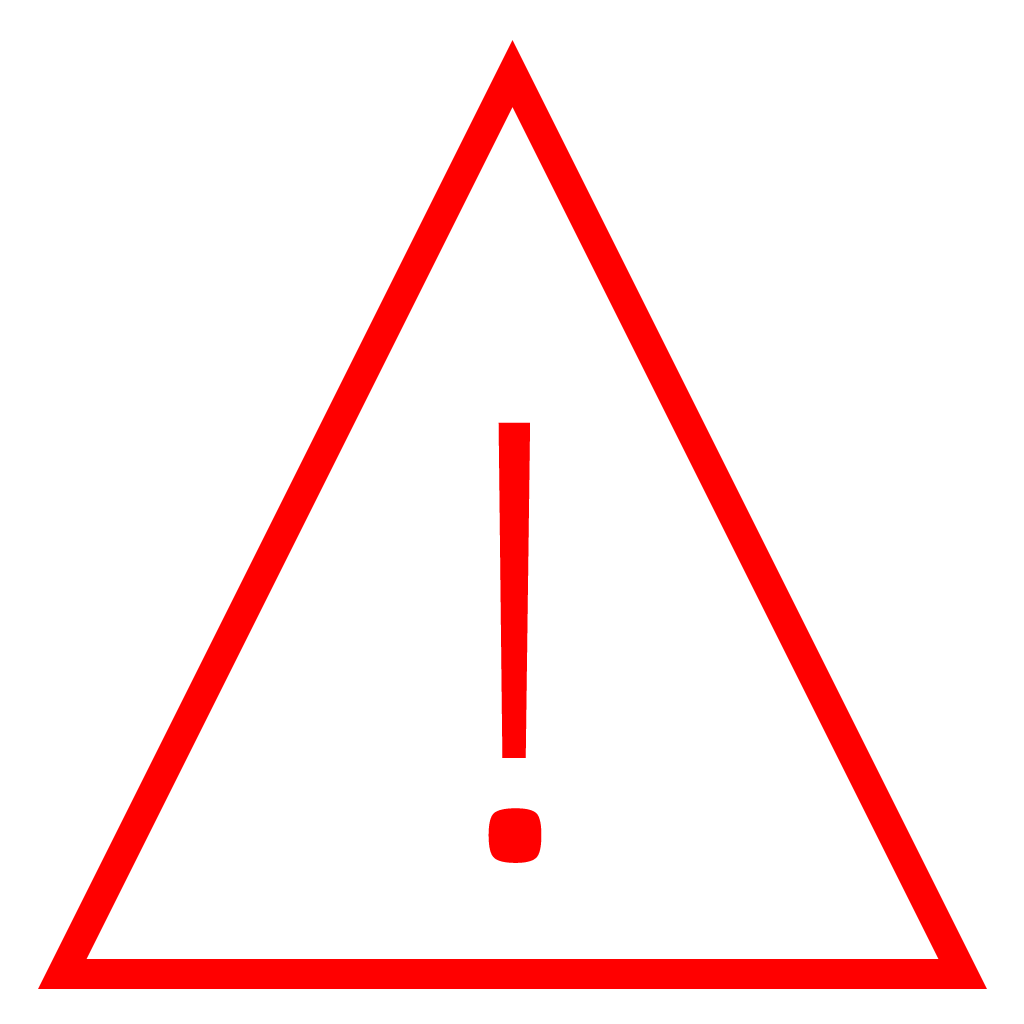
<style>
.page{position:relative;width:1024px;height:1024px;background:#ffffff}
.page>*{position:absolute;margin:0}
.t1{font:625px "AlibabaPuHuiTi_3_35_Thin";letter-spacing:0.075em;color:#ff0000}
</style>
<div class="page">
<p class="t1" style="left:488px;top:422px;width:54px;height:441px">!</p>
</div>
